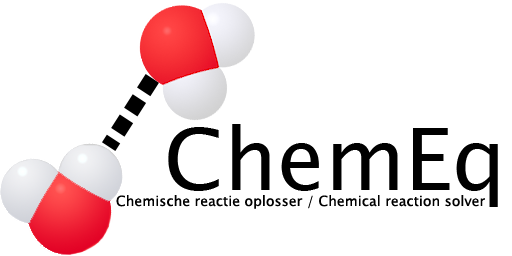
<style>
.page{position:relative;width:512px;height:256px;background:#ffffff}
.page>*{position:absolute;margin:0}
.t1{font:86px "LucidaSansUnicode";color:#000000}
.t2{font:14px "LucidaSansUnicode";color:#000000}
</style>
<div class="page">
<p class="t1" style="left:168px;top:124px;width:330px;height:83px">ChemEq</p>
<p class="t2" style="left:116px;top:195px;width:369px;height:14px">Chemische reactie oplosser / Chemical reaction solver</p>
</div>
